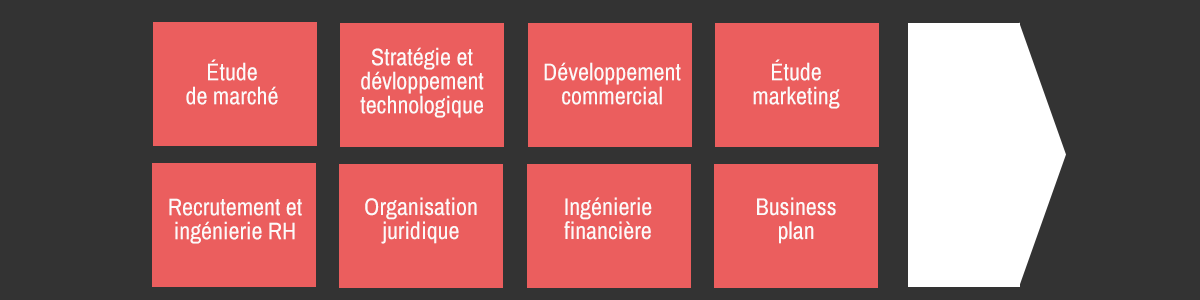
<style>
.page{position:relative;width:1200px;height:300px;background:#333333}
.page>*{position:absolute;margin:0}
.t1{font:24px/24px "ArchivoNarrow-Regular";color:#fcfafa}
</style>
<div class="page">
<p class="t1" style="left:360px;top:47px;width:124px;height:71px;text-align:center">Stratégie et dévloppement technologique</p>
<p class="t1" style="left:186px;top:59px;width:92px;height:46px;text-align:center">Étude <br>de marché</p>
<p class="t1" style="left:544px;top:62px;width:137px;height:43px;text-align:center">Développement commercial</p>
<p class="t1" style="left:753px;top:59px;width:87px;height:50px;text-align:center">Étude<br>marketing</p>
<p class="t1" style="left:169px;top:198px;width:133px;height:46px;text-align:center">Recrutement et ingénierie RH</p>
<p class="t1" style="left:365px;top:197px;width:112px;height:47px;text-align:center">Organisation <br>juridique</p>
<p class="t1" style="left:564px;top:197px;width:88px;height:43px;text-align:center">Ingénierie financière</p>
<p class="t1" style="left:757px;top:197px;width:79px;height:47px;text-align:center">Business<br>plan</p>
</div>
